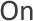
<style>
.page{position:relative;width:33px;height:21px;background:#ffffff}
.page>*{position:absolute;margin:0}
.t1{font:30px "Calibri";color:#3c3c3c}
</style>
<div class="page">
<p class="t1" style="left:0px;top:0px;width:33px;height:21px">On</p>
</div>
